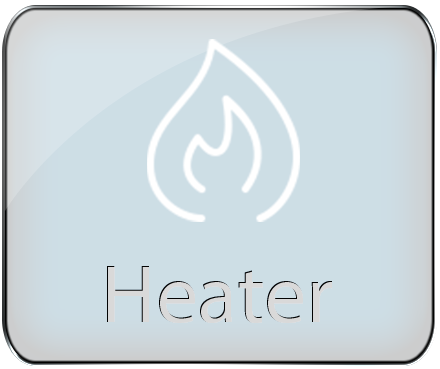
<style>
.page{position:relative;width:440px;height:369px;background:#cddee5}
.page>*{position:absolute;margin:0}
.t1{font:83.2px "MyriadPro-Regular";color:#d9d9d9}
</style>
<div class="page">
<p class="t1" style="left:107px;top:266px;width:225px;height:57px">Heater</p>
</div>
